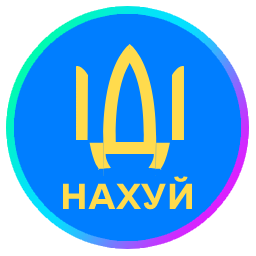
<style>
.page{position:relative;width:256px;height:256px;background:#007eff}
.page>*{position:absolute;margin:0}
.t1{font:34px "e-Ukraine-Bold";color:#ffdb4d}
</style>
<div class="page">
<p class="t1" style="left:63px;top:176px;width:129px;height:34px">НАХУЙ</p>
</div>
